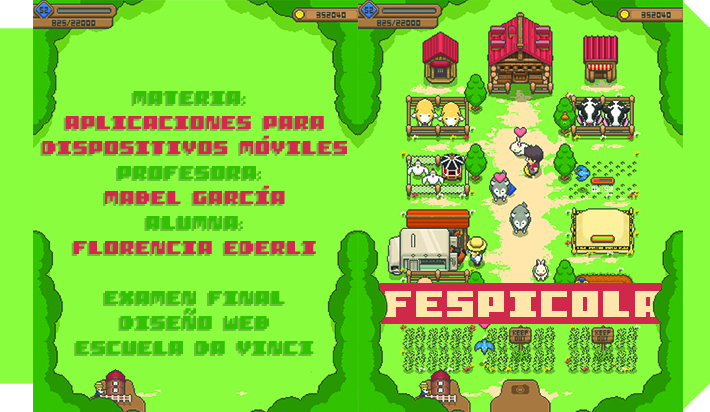
<style>
.page{position:relative;width:710px;height:412px;background:#8afe3e}
.page>*{position:absolute;margin:0}
.t1{font:20.8px "I-pixel-u"}
.t2{font:20.8px "I-pixel-u";color:#31c200}
.t3{font:20.8px "I-pixel-u";color:#d4284c}
</style>
<div class="page">
<p class="t1" style="left:40px;top:93px;width:305px;height:263px;text-align:center">MATERIA: <br>APLICACIONES PARA<br>DISPOSITIVOS MÓVILES<br>PROFESORA: <br>MABEL GARCÍA<br>ALUMNA:<br>FLORENCIA EDERLI<br><br>EXAMEN FINAL<br>DISEÑO WEB<br>ESCUELA DA VINCI</p>
<p class="t2" style="left:42px;top:91px;width:305px;height:263px;text-align:center">MATERIA: <br><span class="t3">APLICACIONES PARA<br>DISPOSITIVOS MÓVILES<br></span>PROFESORA: <br><span class="t3">MABEL GARCÍA<br></span>ALUMNA:<br><span class="t3">FLORENCIA EDERLI<br><br></span>EXAMEN FINAL<br>DISEÑO WEB<br>ESCUELA DA VINCI</p>
</div>
